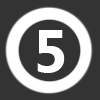
<style>
.page{position:relative;width:100px;height:100px;background:#333333}
.page>*{position:absolute;margin:0}
.t1{font:60px "SegoeUI-Bold";letter-spacing:-0.105em;color:#ffffff}
</style>
<div class="page">
<p class="t1" style="left:37px;top:30px;width:28px;height:43px">5</p>
</div>
